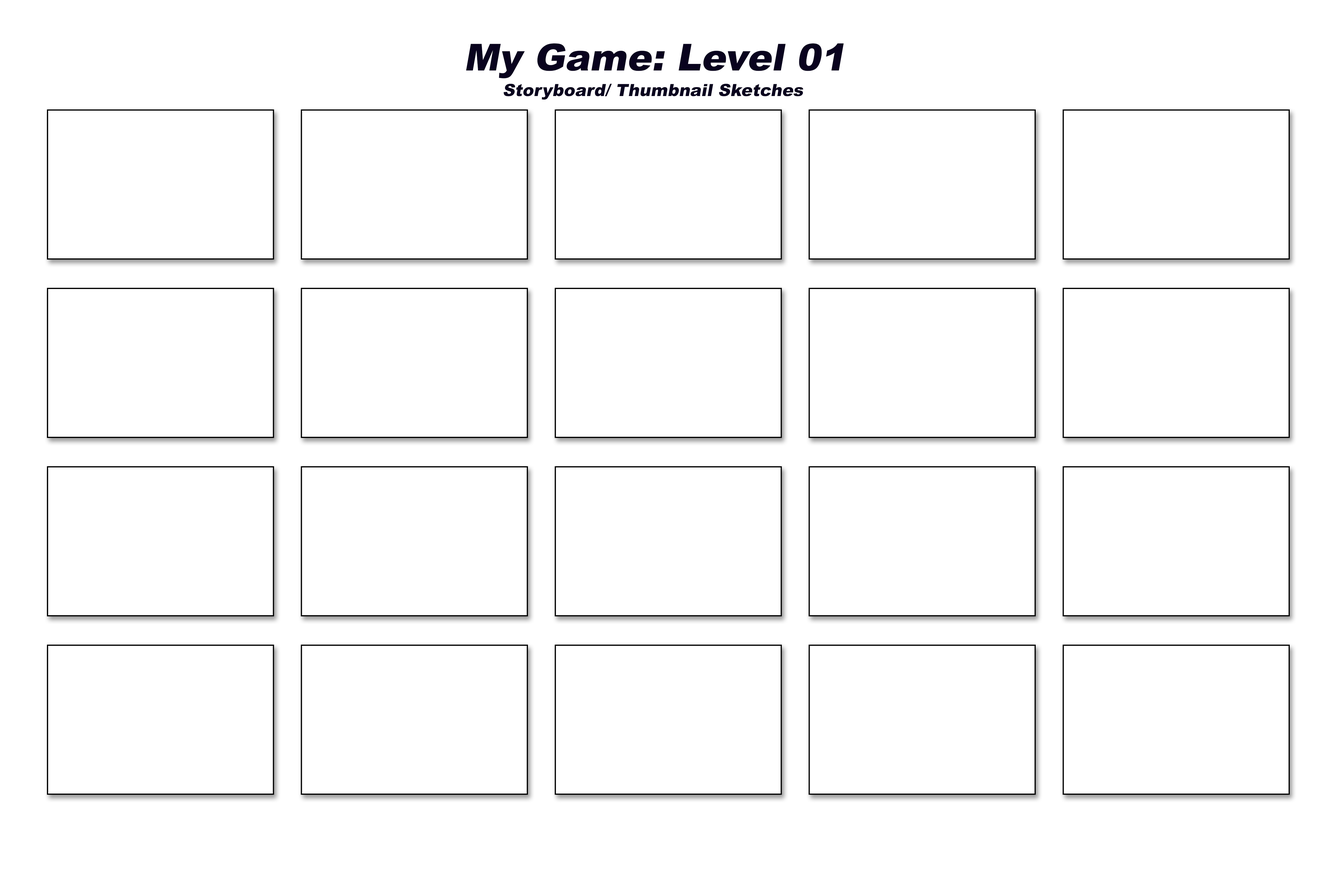
<style>
.page{position:relative;width:1337px;height:892px;background:#ffffff}
.page>*{position:absolute;margin:0}
.t1{font:37.2px "Arial-Black";color:#09031e;font-style:italic}
.t2{font:16.9px "Arial-Black";color:#09031e;font-style:italic}
</style>
<div class="page">
<p class="t1" style="left:466px;top:43px;width:378px;height:35px">My Game: Level 01</p>
<p class="t2" style="left:504px;top:84px;width:300px;height:16px">Storyboard/ Thumbnail Sketches</p>
</div>
